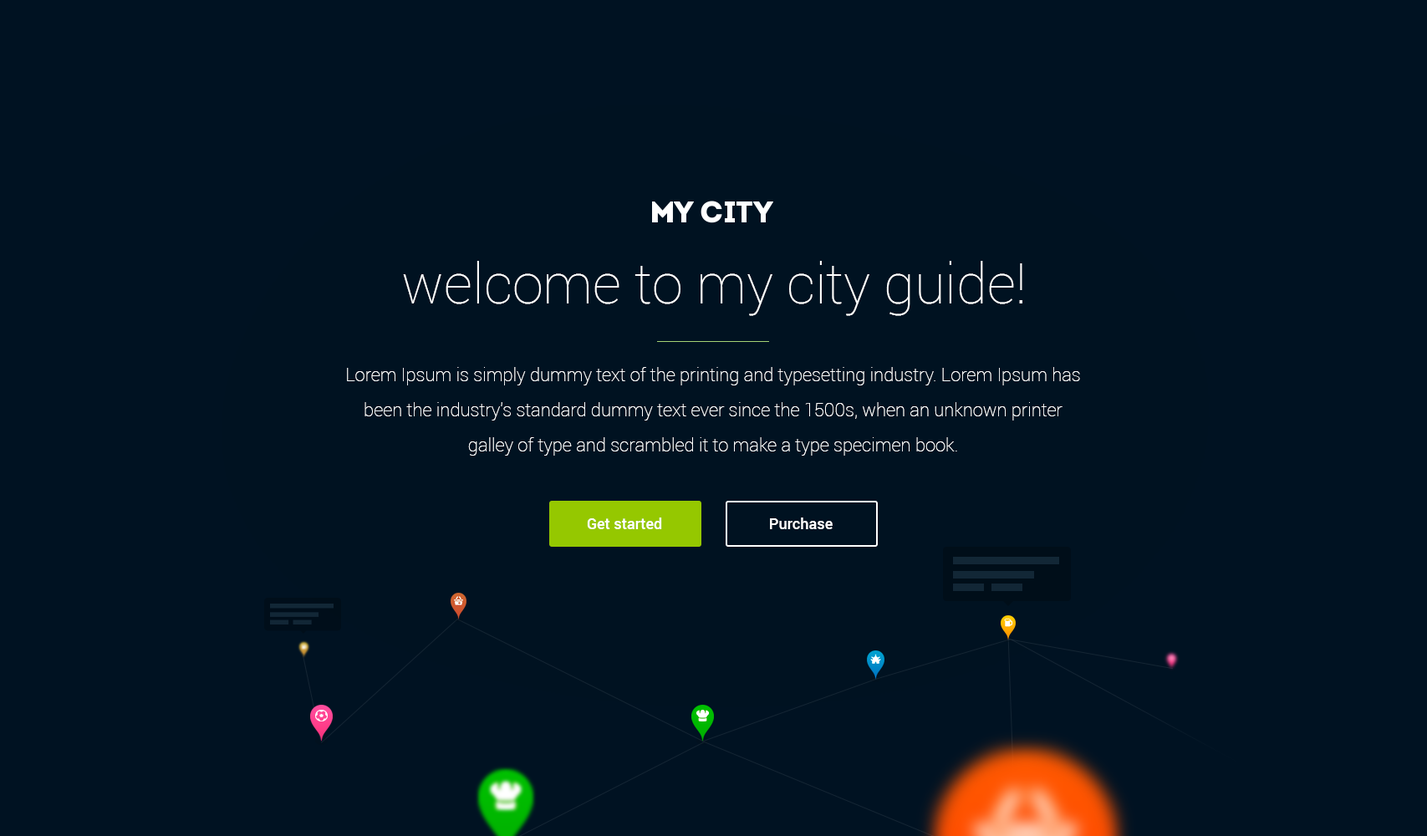
<style>
.page{position:relative;width:1427px;height:836px;background:#001222}
.page>*{position:absolute;margin:0}
.t1{font:56px "Roboto-Thin";color:#ffffff}
.t2{font:18.4px/35.1px "Roboto-Thin";color:#ffffff}
.t3{font:15px "Roboto-Medium";color:#ffffff}
</style>
<div class="page">
<p class="t1" style="left:403px;top:261px;width:619px;height:55px">welcome to my city guide!</p>
<p class="t2" style="left:347px;top:367px;width:733px;height:89px;text-align:center">Lorem Ipsum is simply dummy text of the printing and typesetting industry. Lorem Ipsum has been the industry's standard dummy text ever since the 1500s, when an unknown printer <br>galley of type and scrambled it to make a type specimen book.</p>
<p class="t3" style="left:587px;top:517px;width:75px;height:12px">Get started</p>
<p class="t3" style="left:770px;top:517px;width:62px;height:12px">Purchase</p>
</div>
